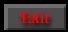
<style>
.page{position:relative;width:68px;height:32px;background:#000000}
.page>*{position:absolute;margin:0}
.t1{font:16.7px "TimesNewRomanPSMT";color:#ff0000}
</style>
<div class="page">
<p class="t1" style="left:19px;top:11px;width:31px;height:13px">Salir</p>
<p class="t1" style="left:21px;top:11px;width:29px;height:13px">Exit</p>
</div>
